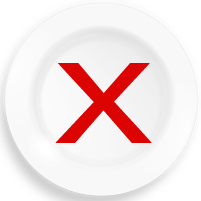
<style>
.page{position:relative;width:201px;height:201px}
.page>*{position:absolute;margin:0}
.t1{font:104.6px "AgencyFB-Reg";color:#dc0303;scale:2.68 1}
</style>
<div class="page">
<p class="t1" style="left:55px;top:63px;width:97px;height:80px">X</p>
</div>
